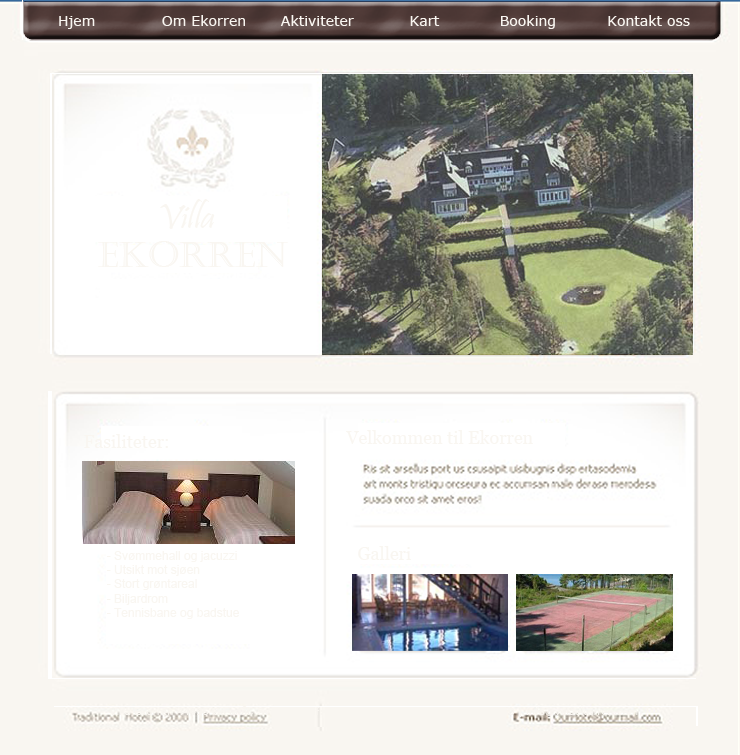
<style>
.page{position:relative;width:740px;height:755px;background:#ffffff}
.page>*{position:absolute;margin:0}
.t1{font:14px "Verdana";color:#f9f6f1}
.t2{font:36px "Pristina-Regular";color:#f9f6f1}
.t3{font:36px "Castellar";color:#f9f6f1}
.t4{font:18px "Georgia";color:#f9f6f1}
.t5{font:12px "ArialMT";color:#f9f6f1}
</style>
<div class="page">
<p class="t1" style="left:59px;top:16px;width:36px;height:13px">Hjem</p>
<p class="t1" style="left:162px;top:15px;width:83px;height:11px">Om Ekorren</p>
<p class="t1" style="left:280px;top:15px;width:74px;height:11px">Aktiviteter</p>
<p class="t1" style="left:410px;top:16px;width:30px;height:10px">Kart</p>
<p class="t1" style="left:501px;top:15px;width:54px;height:14px">Booking</p>
<p class="t1" style="left:608px;top:15px;width:82px;height:11px">Kontakt oss</p>
<p class="t2" style="left:160px;top:199px;width:55px;height:30px">Villa</p>
<p class="t3" style="left:98px;top:241px;width:190px;height:26px">Ekorren</p>
<p class="t4" style="left:84px;top:434px;width:84px;height:14px">Fasiliteter:</p>
<p class="t4" style="left:346px;top:430px;width:187px;height:14px">Velkommen til Ekorren</p>
<p class="t5" style="left:107px;top:551px;width:132px;height:68px">- Svømmehall og jacuzzi<br>- Utsikt mot sjøen<br>- Stort grøntareal<br>- Biljardrom<br>- Tennisbane og badstue</p>
<p class="t4" style="left:358px;top:546px;width:53px;height:14px">Galleri</p>
</div>
